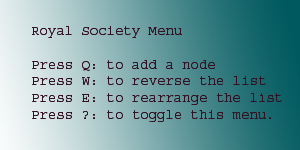
<style>
.page{position:relative;width:300px;height:150px}
.page>*{position:absolute;margin:0}
.t1{font:14px "Courier";color:#331022}
</style>
<div class="page">
<p class="t1" style="left:32px;top:26px;width:250px;height:96px">Royal Society Menu<br><br>Press Q: to add a node<br>Press W: to reverse the list<br>Press E: to rearrange the list<br>Press ?: to toggle this menu.</p>
</div>
